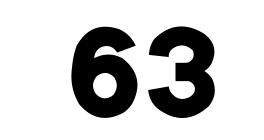
<style>
.page{position:relative;width:264px;height:140px;background:#ffffff}
.page>*{position:absolute;margin:0}
.t1{font:124.4px "Ccrige-Regular";color:#000000}
</style>
<div class="page">
<p class="t1" style="left:71px;top:26px;width:144px;height:92px">63</p>
</div>
